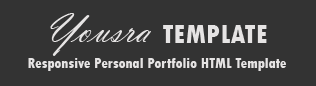
<style>
.page{position:relative;width:316px;height:86px;background:#333333}
.page>*{position:absolute;margin:0}
.t1{font:44px "VladimirScript";color:#e6e4e4}
.t2{font:28px "TwCenMT-CondensedExtraBold";color:#e6e4e4}
.t3{font:15px "TwCenMT-CondensedExtraBold";color:#e6e4e4}
</style>
<div class="page">
<p class="t1" style="left:50px;top:13px;width:101px;height:43px">Yousra</p>
<p class="t2" style="left:163px;top:25px;width:104px;height:18px">TEMPLATE</p>
<p class="t3" style="left:28px;top:58px;width:258px;height:13px">Responsive Personal Portfolio HTML Template</p>
</div>
